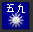
<style>
.page{position:relative;width:33px;height:32px;background:#000090}
.page>*{position:absolute;margin:0}
.t1{font:10.4px "SimSun";color:#ffffff}
</style>
<div class="page">
<p class="t1" style="left:7px;top:4px;width:18px;height:9px">五九</p>
</div>
